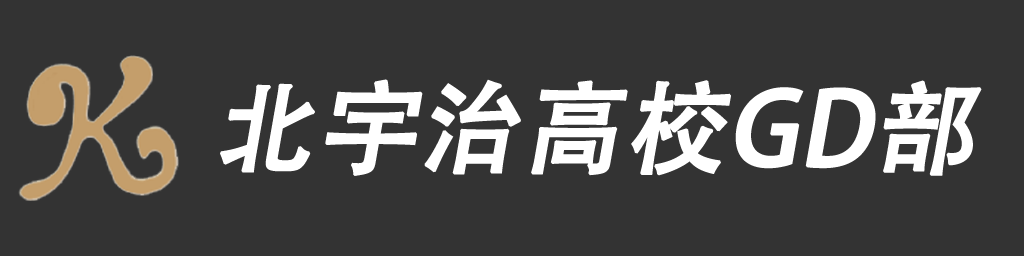
<style>
.page{position:relative;width:1024px;height:256px;background:#333333}
.page>*{position:absolute;margin:0}
.t1{font:100px "AdobeHeitiStd-Regular";color:#ffffff;font-weight:bold;font-style:italic}
</style>
<div class="page">
<p class="t1" style="left:220px;top:79px;width:762px;height:97px">北宇治高校GD部</p>
</div>
